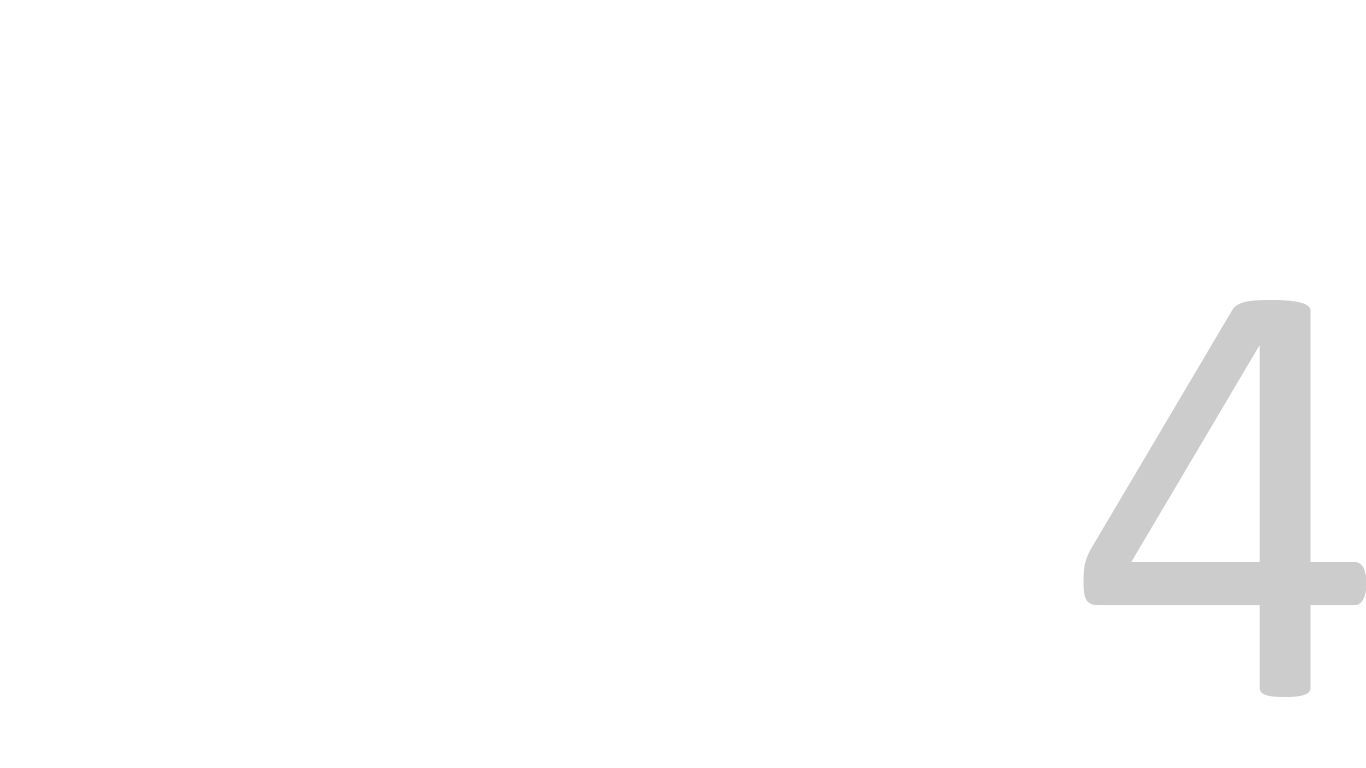
<style>
.page{position:relative;width:1366px;height:768px;background:#ffffff}
.page>*{position:absolute;margin:0}
.t1{font:622px "Calibri";color:#cccccc}
</style>
<div class="page">
<p class="t1" style="left:1083px;top:300px;width:284px;height:397px">4</p>
</div>
